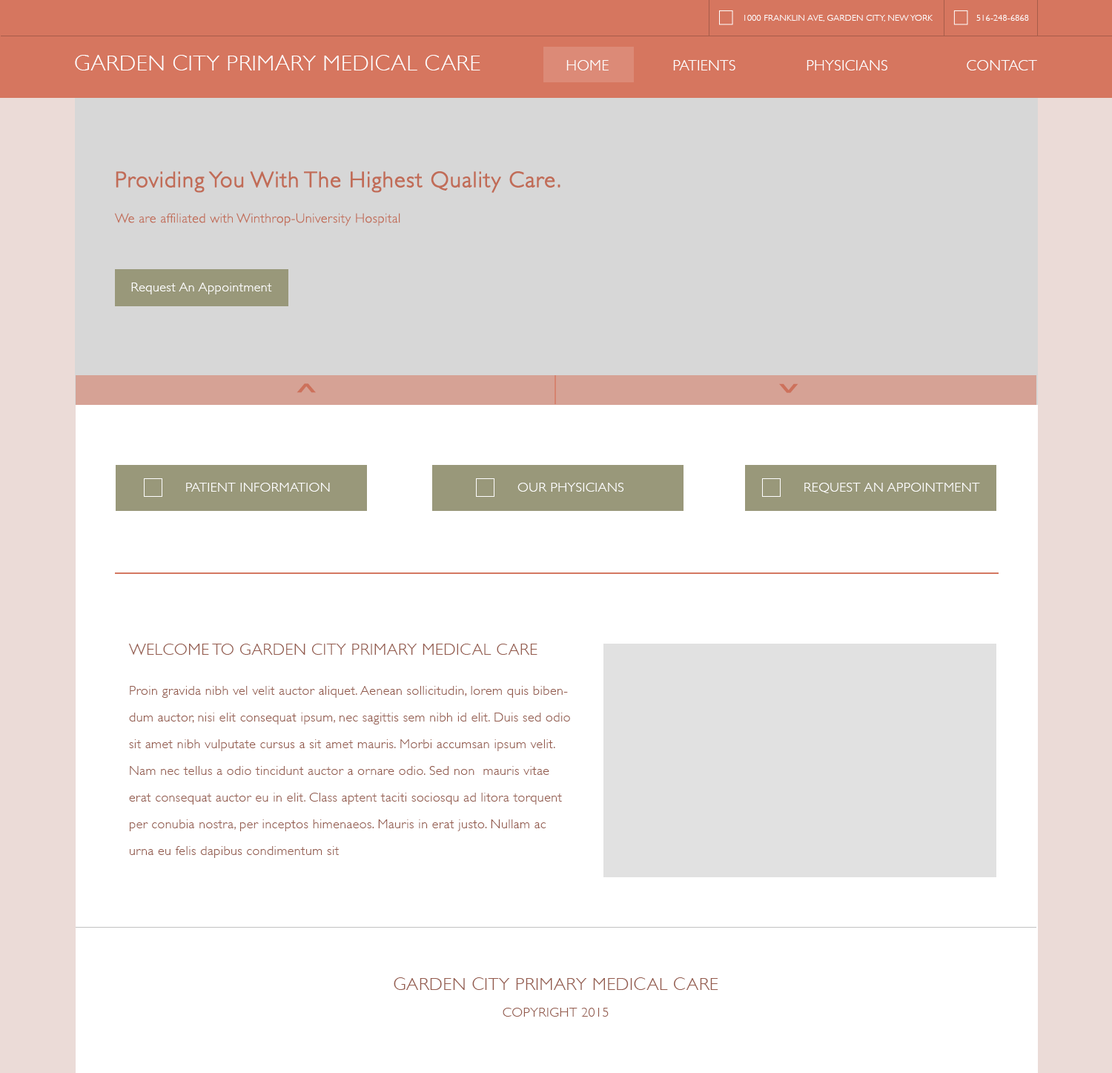
<style>
.page{position:relative;width:1112px;height:1073px;background:#ffffff}
.page>*{position:absolute;margin:0}
.t1{font:8.9px "GillSans-Light";letter-spacing:0.025em;color:#ffffff;text-transform:uppercase}
.t2{font:22.2px "GillSans-Light";letter-spacing:0.025em;color:#ffffff;text-transform:uppercase}
.t3{font:14.8px "GillSans-Light";letter-spacing:0.025em;color:#ffffff;text-transform:uppercase}
.t4{font:13.3px/17.8px "GillSans-Light";letter-spacing:0.025em;color:#c16c57}
.t5{font:22.2px/26.7px "GillSans-Light";letter-spacing:0.025em;color:#c16c57;font-weight:bold}
.t6{font:13.3px "GillSans-Light";letter-spacing:0.025em;color:#ffffff}
.t7{font:33.6px "GillSans-Bold";letter-spacing:0.025em;color:#c16c57;text-transform:uppercase;scale:0.48 1}
.t8{font:13.3px "GillSans-Light";letter-spacing:0.025em;color:#ffffff;text-transform:uppercase}
.t9{font:13.3px/26.7px "GillSans-Light";letter-spacing:0.025em;color:#945b4d}
.t10{font:16.3px/26.7px "GillSans-Light";letter-spacing:0.025em;color:#945b4d;text-transform:uppercase}
.t11{font:17.8px/26.7px "GillSans-Light";letter-spacing:0.025em;color:#945b4d;text-transform:uppercase}
.t12{font:13.3px/26.7px "GillSans-Light";letter-spacing:0.025em;color:#945b4d;text-transform:uppercase}
</style>
<div class="page">
<p class="t1" style="left:744px;top:15px;width:188px;height:6px">1000 Franklin Ave, Garden City, NEw yORK</p>
<p class="t1" style="left:976px;top:15px;width:53px;height:6px">516-248-6868</p>
<p class="t2" style="left:75px;top:55px;width:405px;height:15px">Garden City Primary mEDICAL cARE</p>
<p class="t3" style="left:566px;top:60px;width:471px;height:10px">Home    Patients    Physicians    Contact</p>
<p class="t4" style="left:114px;top:171px;width:446px;height:55px"><span class="t5">Providing You With The Highest Quality Care.<br><br></span>We are affiliated with Winthrop-University Hospital</p>
<p class="t6" style="left:131px;top:282px;width:141px;height:12px">Request An Appointment</p>
<p class="t7" style="left:296px;top:383px;width:20px;height:10px;rotate:90deg">&lt;</p>
<p class="t7" style="left:779px;top:383px;width:19px;height:10px;rotate:-90deg">&lt;</p>
<p class="t8" style="left:186px;top:483px;width:144px;height:8px">Patient Information</p>
<p class="t8" style="left:517px;top:483px;width:107px;height:8px">Our Physicians</p>
<p class="t8" style="left:804px;top:483px;width:176px;height:10px">rEQUEST aN aPPOINTMENT</p>
<p class="t9" style="left:128px;top:643px;width:442px;height:215px"><span class="t10">Welcome To Garden City Primary Medical Care<br><br></span>Proin gravida nibh vel velit auctor aliquet. Aenean sollicitudin, lorem quis bibendum auctor, nisi elit consequat ipsum, nec sagittis sem nibh id elit. Duis sed odio sit amet nibh vulputate cursus a sit amet mauris. Morbi accumsan ipsum velit. Nam nec tellus a odio tincidunt auctor a ornare odio. Sed non  mauris vitae erat consequat auctor eu in elit. Class aptent taciti sociosqu ad litora torquent per conubia nostra, per inceptos himenaeos. Mauris in erat justo. Nullam ac urna eu felis dapibus condimentum sit<br>.</p>
<p class="t11" style="left:394px;top:977px;width:324px;height:39px;text-align:center">Garden City Primary Medical Care<br><span class="t12">Copyright 2015</span></p>
</div>
